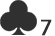
<style>
.page{position:relative;width:55px;height:36px;background:#ffffff}
.page>*{position:absolute;margin:0}
.t1{font:23.4px "MyriadPro-Regular";letter-spacing:-0.1em;color:#303030;font-weight:bold}
</style>
<div class="page">
<p class="t1" style="left:41px;top:19px;width:11px;height:17px">7</p>
</div>
